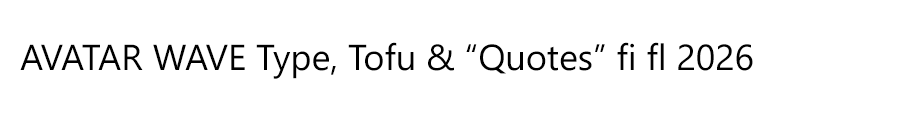
<style>
.page{position:relative;width:900px;height:120px;background:#ffffff}
.page>*{position:absolute;margin:0}
.t1{font:36px "SegoeUI";color:#000000}
</style>
<div class="page">
<p class="t1" style="left:20px;top:42px;width:733px;height:37px">AVATAR WAVE Type, Tofu &amp; “Quotes” fi fl 2026</p>
</div>
